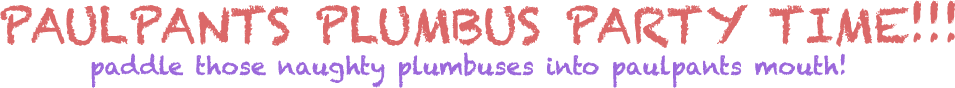
<style>
.page{position:relative;width:955px;height:88px;background:#ffffff}
.page>*{position:absolute;margin:0}
.t1{font:48px "Chalkduster";color:#db6868}
.t2{font:24px "Chalkduster";color:#9b68db}
</style>
<div class="page">
<p class="t1" style="left:0px;top:0px;width:955px;height:48px">PAULPANTS PLUMBUS PARTY TIME!!!</p>
<p class="t2" style="left:91px;top:52px;width:754px;height:36px">paddle those naughty plumbuses into paulpants mouth!</p>
</div>
